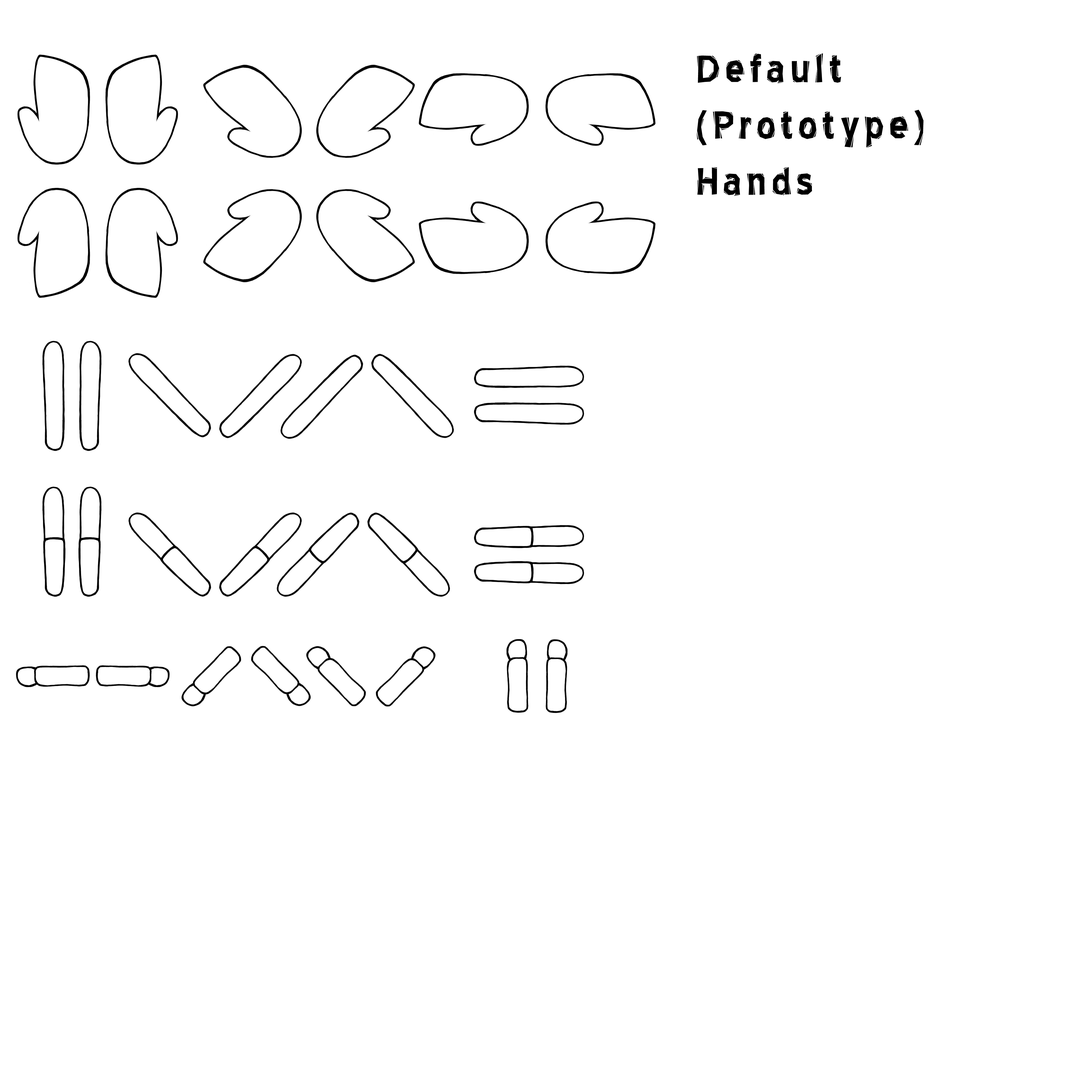
<style>
.page{position:relative;width:1092px;height:1092px;background:#ffffff}
.page>*{position:absolute;margin:0}
.t1{font:47px "BlueHighwayLinocut";letter-spacing:0.1em;color:#000000}
</style>
<div class="page">
<p class="t1" style="left:696px;top:53px;width:228px;height:143px">Default (Prototype)<br>Hands</p>
</div>
